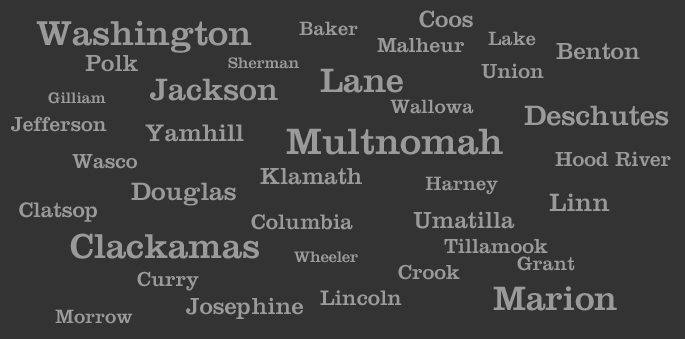
<style>
.page{position:relative;width:685px;height:339px;background:#333333}
.page>*{position:absolute;margin:0}
.t1{font:24px "ClarendonLTStd";color:#9a9a9a}
.t2{font:36px "ClarendonLTStd";color:#9a9a9a}
.t3{font:20px "ClarendonLTStd";color:#9a9a9a}
.t4{font:21px "ClarendonLTStd";color:#9a9a9a}
.t5{font:16px "ClarendonLTStd";color:#9a9a9a}
.t6{font:32px "ClarendonLTStd";color:#9a9a9a}
.t7{font:35px "ClarendonLTStd";color:#9a9a9a}
.t8{font:29px "ClarendonLTStd";color:#9a9a9a}
.t9{font:25px "ClarendonLTStd";color:#9a9a9a}
.t10{font:38px "ClarendonLTStd";color:#9a9a9a}
.t11{font:26px "ClarendonLTStd";color:#9a9a9a}
.t12{font:22px "ClarendonLTStd";color:#9a9a9a}
</style>
<div class="page">
<p class="t1" style="left:419px;top:10px;width:54px;height:18px">Coos</p>
<p class="t2" style="left:36px;top:20px;width:216px;height:33px">Washington</p>
<p class="t3" style="left:299px;top:21px;width:59px;height:15px">Baker</p>
<p class="t4" style="left:377px;top:38px;width:87px;height:15px">Malheur</p>
<p class="t3" style="left:488px;top:31px;width:48px;height:15px">Lake</p>
<p class="t1" style="left:556px;top:43px;width:84px;height:17px">Benton</p>
<p class="t1" style="left:85px;top:55px;width:53px;height:17px">Polk</p>
<p class="t5" style="left:228px;top:57px;width:71px;height:12px">Sherman</p>
<p class="t4" style="left:481px;top:63px;width:63px;height:16px">Union</p>
<p class="t6" style="left:150px;top:78px;width:128px;height:23px">Jackson</p>
<p class="t7" style="left:320px;top:68px;width:83px;height:25px">Lane</p>
<p class="t5" style="left:48px;top:92px;width:58px;height:12px">Gilliam</p>
<p class="t3" style="left:390px;top:99px;width:84px;height:15px">Wallowa</p>
<p class="t8" style="left:524px;top:105px;width:145px;height:21px">Deschutes</p>
<p class="t4" style="left:11px;top:116px;width:96px;height:16px">Jefferson</p>
<p class="t9" style="left:145px;top:124px;width:99px;height:18px">Yamhill</p>
<p class="t10" style="left:286px;top:128px;width:217px;height:27px">Multnomah</p>
<p class="t4" style="left:72px;top:154px;width:65px;height:15px">Wasco</p>
<p class="t4" style="left:555px;top:151px;width:116px;height:16px">Hood River</p>
<p class="t1" style="left:260px;top:168px;width:102px;height:17px">Klamath</p>
<p class="t11" style="left:131px;top:182px;width:105px;height:24px">Douglas</p>
<p class="t3" style="left:425px;top:176px;width:73px;height:19px">Harney</p>
<p class="t11" style="left:549px;top:193px;width:61px;height:18px">Linn</p>
<p class="t12" style="left:19px;top:202px;width:78px;height:20px">Clatsop</p>
<p class="t12" style="left:251px;top:214px;width:102px;height:16px">Columbia</p>
<p class="t1" style="left:413px;top:211px;width:102px;height:18px">Umatilla</p>
<p class="t2" style="left:70px;top:233px;width:189px;height:26px">Clackamas</p>
<p class="t4" style="left:444px;top:238px;width:104px;height:16px">Tillamook</p>
<p class="t5" style="left:294px;top:251px;width:64px;height:12px">Wheeler</p>
<p class="t3" style="left:517px;top:256px;width:58px;height:15px">Grant</p>
<p class="t4" style="left:398px;top:264px;width:62px;height:16px">Crook</p>
<p class="t4" style="left:137px;top:271px;width:62px;height:20px">Curry</p>
<p class="t12" style="left:320px;top:290px;width:82px;height:16px">Lincoln</p>
<p class="t7" style="left:493px;top:286px;width:124px;height:25px">Marion</p>
<p class="t1" style="left:186px;top:297px;width:117px;height:22px">Josephine</p>
<p class="t3" style="left:55px;top:309px;width:78px;height:15px">Morrow</p>
</div>
